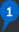
<style>
.page{position:relative;width:19px;height:32px;background:#0066cc}
.page>*{position:absolute;margin:0}
.t1{font:12px "Verdana";color:#ffffff;font-weight:bold}
</style>
<div class="page">
<p class="t1" style="left:7px;top:7px;width:6px;height:10px">1</p>
</div>
